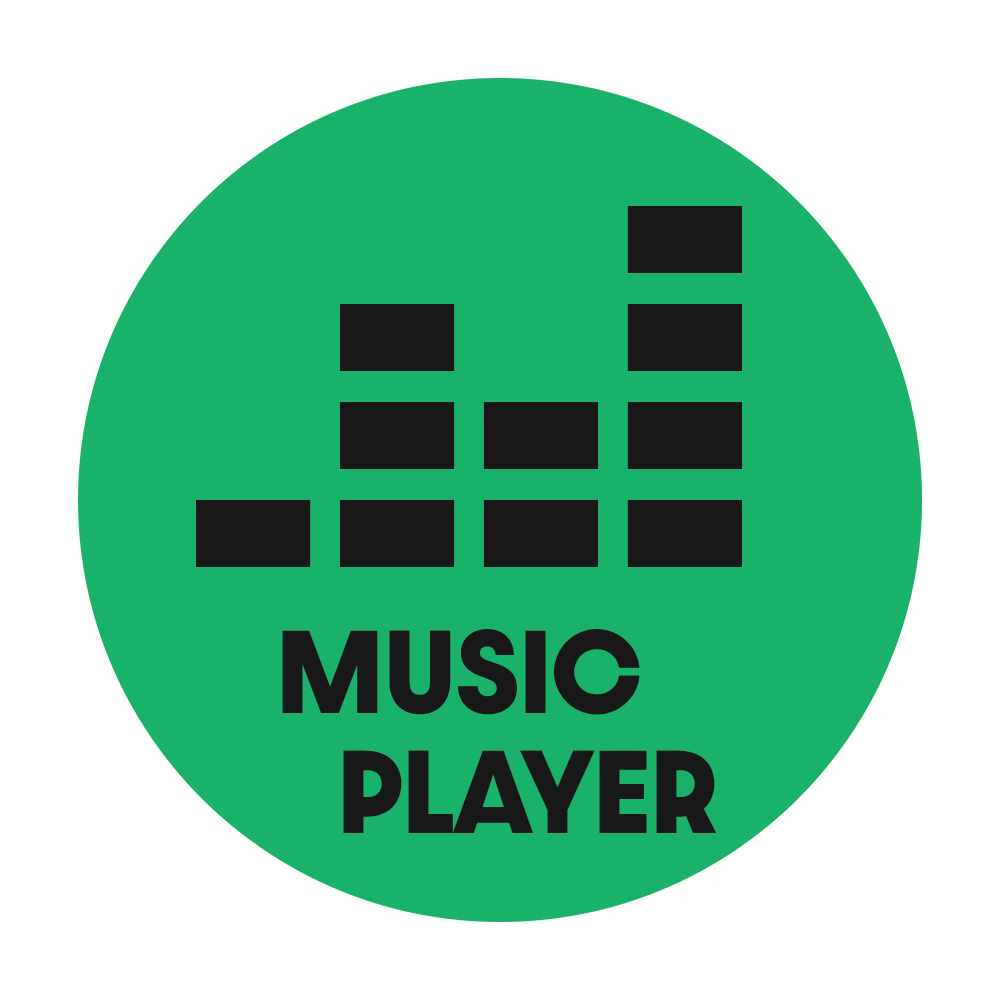
<style>
.page{position:relative;width:1000px;height:1000px;background:#1ab26b}
.page>*{position:absolute;margin:0}
.t1{font:100px "DazzleUnicase-Bold";color:#181818}
</style>
<div class="page">
<p class="t1" style="left:282px;top:629px;width:435px;height:204px;text-align:center">MUSIC<br>     PLAYER</p>
</div>
